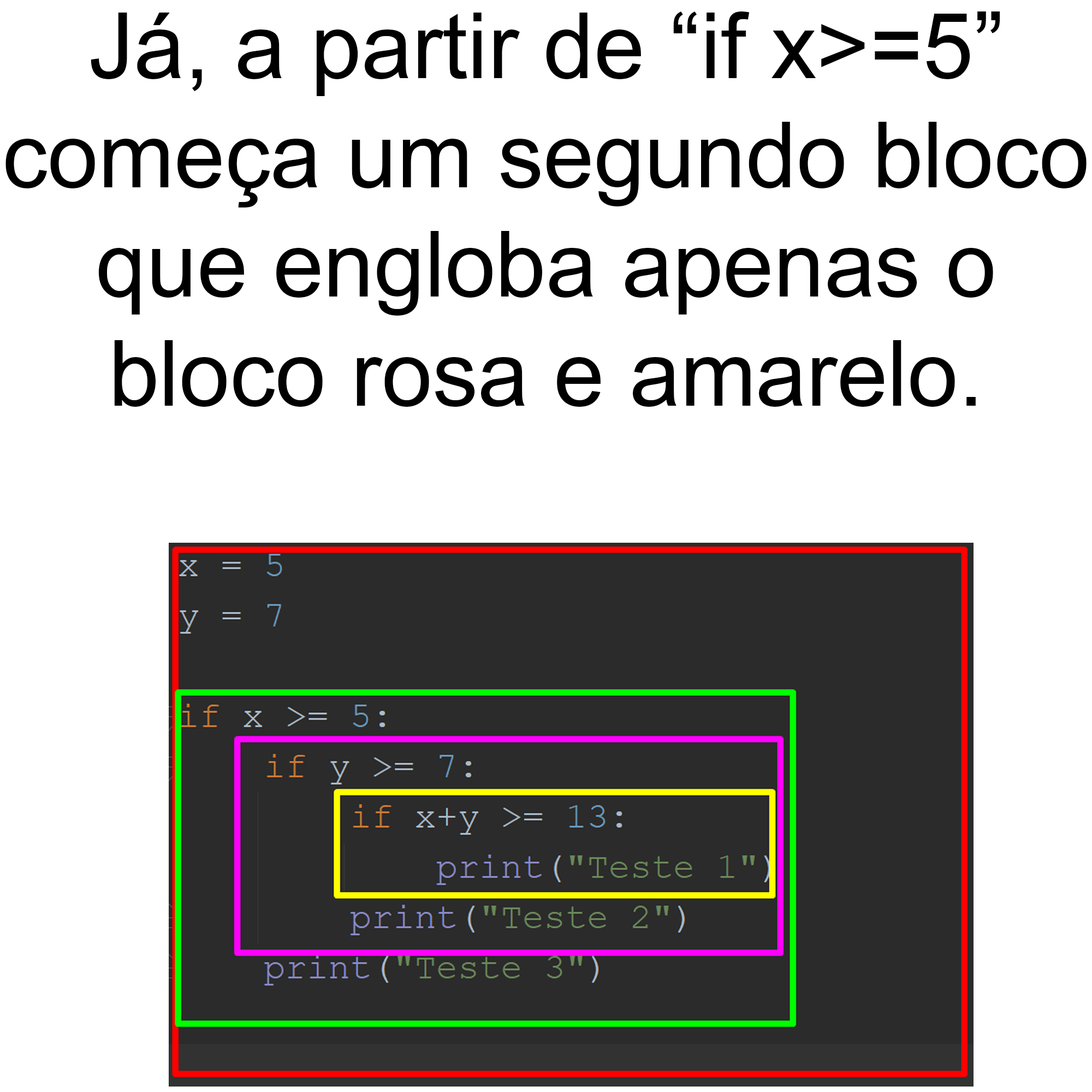
<style>
.page{position:relative;width:1092px;height:1092px;background:#ffffff}
.page>*{position:absolute;margin:0}
.t1{font:91px "ArialMT";color:#000000}
</style>
<div class="page">
<p class="t1" style="left:5px;top:11px;width:1082px;height:396px;text-align:center">Já, a partir de “if x&gt;=5”<br>começa um segundo bloco<br>que engloba apenas o<br>bloco rosa e amarelo.</p>
</div>
